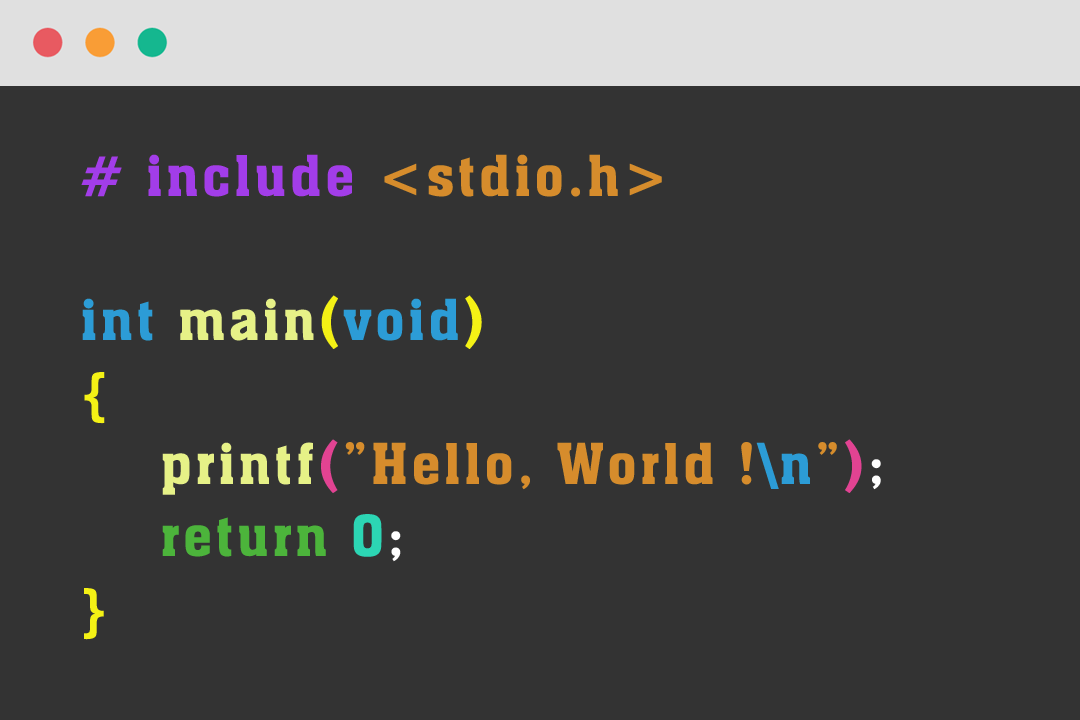
<style>
.page{position:relative;width:1080px;height:720px;background:#333333}
.page>*{position:absolute;margin:0}
.t1{font:55px/72px "AachenBT-Roman";letter-spacing:0.06em;color:#d68c2c}
.t2{font:55px/72px "AachenBT-Roman";letter-spacing:0.06em;color:#a23de9}
.t3{font:55px/72px "AachenBT-Roman";letter-spacing:0.06em;color:#2c9cd6}
.t4{font:55px/72px "AachenBT-Roman";letter-spacing:0.06em;color:#e6f187}
.t5{font:55px/72px "AachenBT-Roman";letter-spacing:0.06em;color:#f4f115}
.t6{font:55px/72px "AachenBT-Roman";letter-spacing:0.06em;color:#e24392}
.t7{font:55px/72px "AachenBT-Roman";letter-spacing:0.06em;color:#ffffff}
.t8{font:55px/72px "AachenBT-Roman";letter-spacing:0.06em;color:#4cb43b}
.t9{font:55px/72px "AachenBT-Roman";letter-spacing:0.06em;color:#2cd6b4}
</style>
<div class="page">
<p class="t1" style="left:81px;top:154px;width:800px;height:486px"><span class="t2"># include </span>&lt;stdio.h&gt;<br><span class="t3"><br>int </span><span class="t4">main</span><span class="t5">(</span><span class="t3">void</span><span class="t5">)<br>{<br>    </span><span class="t4">printf</span><span class="t6">(</span>”Hello, World !<span class="t3">\n</span>”<span class="t6">)</span><span class="t7">;<br>    </span><span class="t8">return </span><span class="t9">0</span><span class="t7">;<br></span><span class="t5">}</span></p>
</div>
